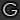
<style>
.page{position:relative;width:20px;height:20px;background:#333333}
.page>*{position:absolute;margin:0}
.t1{font:18px "CenturyGothic";color:#dadada}
</style>
<div class="page">
<p class="t1" style="left:3px;top:3px;width:15px;height:13px">G</p>
</div>
